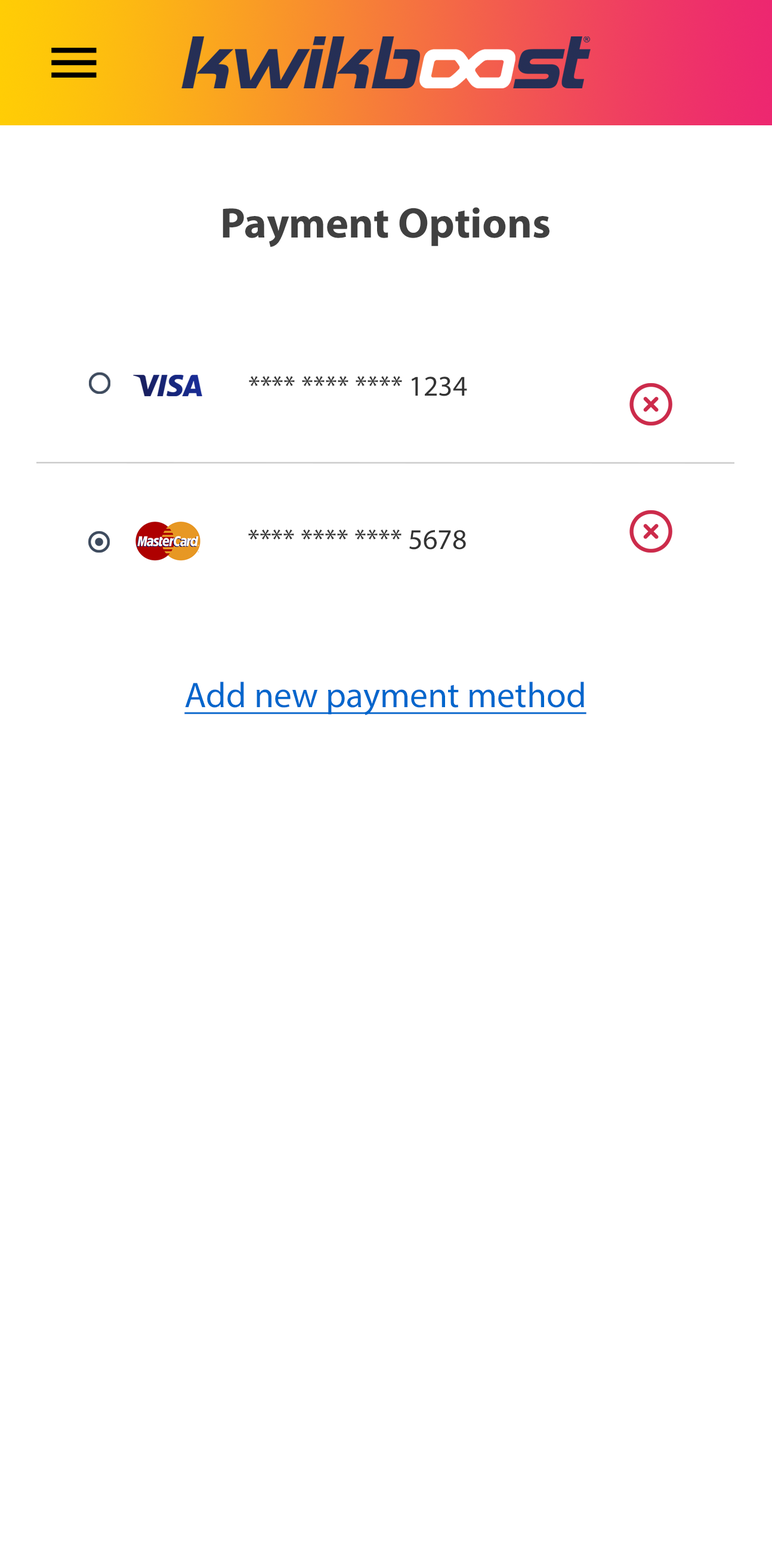
<style>
.page{position:relative;width:772px;height:1545px;background:#ffffff}
.page>*{position:absolute;margin:0}
.t1{font:43px "MyriadPro-Bold";color:#404040}
.t2{font:28.6px "MyriadPro-Regular";color:#333333}
.t3{font:35.8px "MyriadPro-Regular";color:#0066cc;text-decoration:underline}
</style>
<div class="page">
<p class="t1" style="left:223px;top:207px;width:326px;height:40px">Payment Options</p>
<p class="t2" style="left:249px;top:376px;width:218px;height:20px">**** **** **** 1234</p>
<p class="t2" style="left:248px;top:529px;width:218px;height:20px">**** **** **** 5678</p>
<p class="t3" style="left:184px;top:681px;width:402px;height:34px">Add new payment method</p>
</div>
